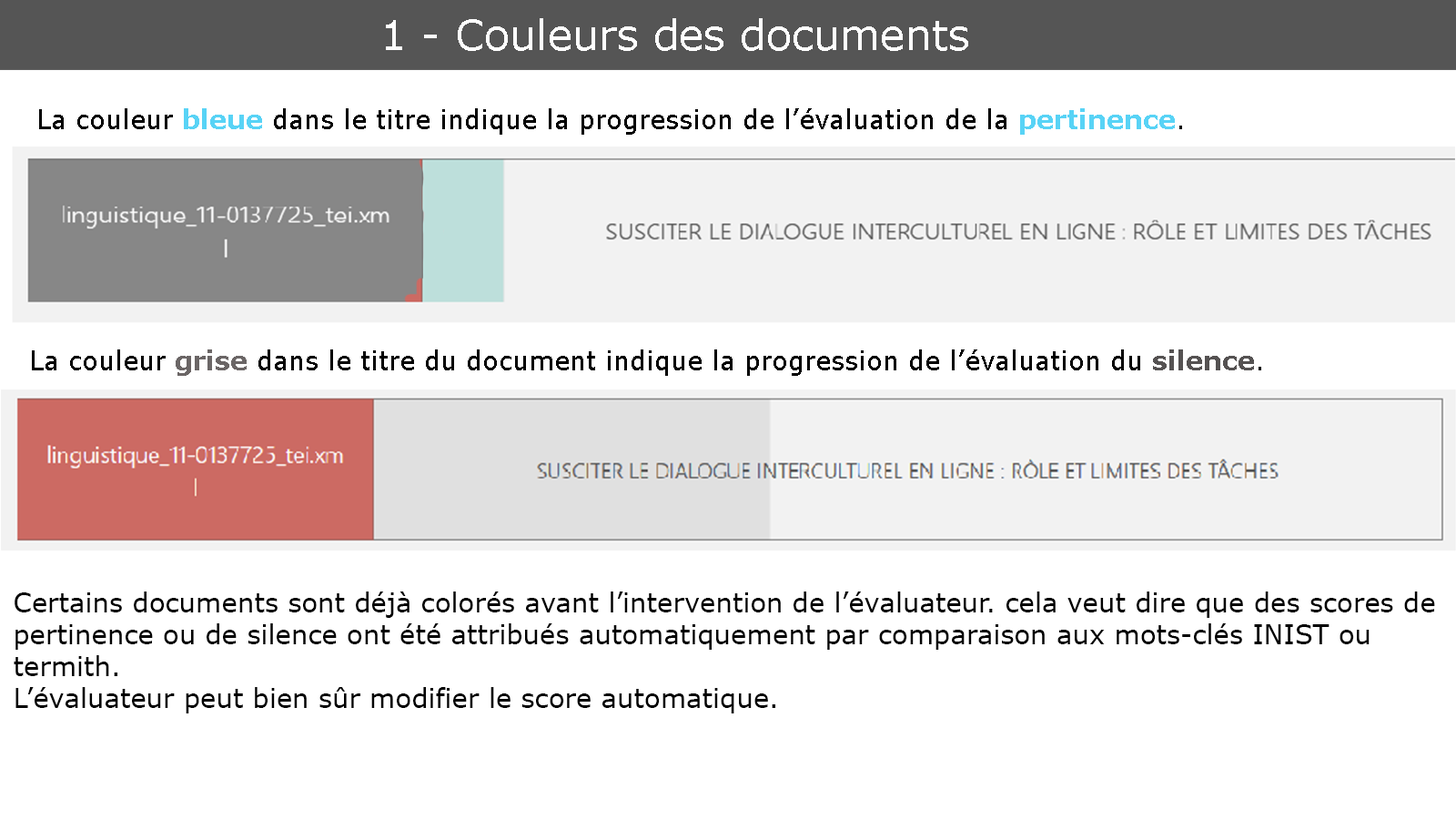
<style>
.page{position:relative;width:1456px;height:819px;background:#ffffff}
.page>*{position:absolute;margin:0}
.t1{font:41.7px "Verdana";color:#ffffff}
.t2{font:26.5px "Verdana";color:#000000}
.t3{font:26.5px "Verdana-Bold";color:#58d3f6}
.t4{font:26.5px "Verdana-Bold";color:#6b6666}
.t5{font:26.5px "Verdana-Bold";color:#555252}
</style>
<div class="page">
<p class="t1" style="left:386px;top:18px;width:582px;height:33px">1 - Couleurs des documents</p>
<p class="t2" style="left:39px;top:108px;width:1143px;height:27px">La couleur <span class="t3">bleue </span>dans le titre indique la progression de l’évaluation de la <span class="t3">pertinence</span>.</p>
<p class="t2" style="left:32px;top:349px;width:1229px;height:27px">La couleur <span class="t4">grise </span>dans le titre du document indique la progression de l’évaluation du <span class="t5">silence</span>.</p>
<p class="t2" style="left:14px;top:591px;width:1421px;height:122px">Certains documents sont déjà colorés avant l’intervention de l’évaluateur. cela veut dire que des scores de pertinence ou de silence ont été attribués automatiquement par comparaison aux mots-clés INIST ou termith.<br>L’évaluateur peut bien sûr modifier le score automatique.</p>
</div>
